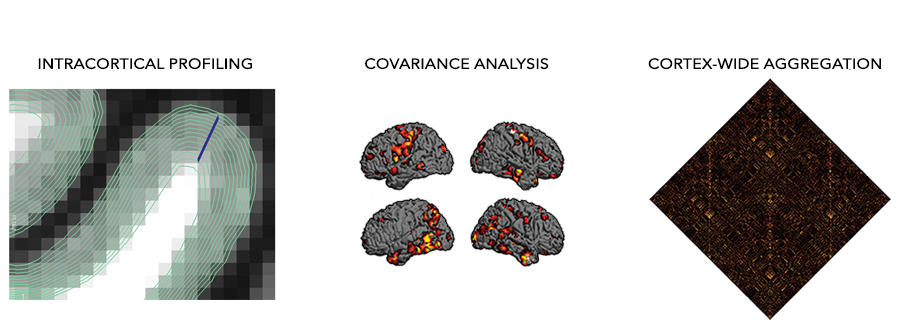
<style>
.page{position:relative;width:905px;height:329px;background:#ffffff}
.page>*{position:absolute;margin:0}
.t1{font:14.1px "AvenirNext-Regular";color:#000000;font-weight:bold;scale:1.11 1}
</style>
<div class="page">
<p class="t1" style="left:38px;top:58px;width:214px;height:12px">INTRACORTICAL PROFILING</p>
<p class="t1" style="left:365px;top:58px;width:184px;height:12px">COVARIANCE ANALYSIS</p>
<p class="t1" style="left:648px;top:58px;width:233px;height:12px">CORTEX-WIDE AGGREGATION</p>
</div>
